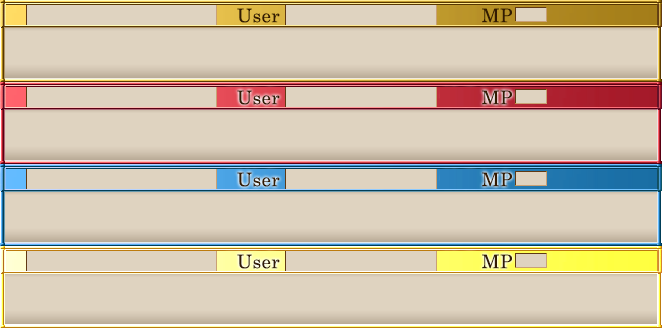
<style>
.page{position:relative;width:664px;height:328px;background:#dfd3c0}
.page>*{position:absolute;margin:0}
.t1{font:18.7px "CenturySchoolbook";letter-spacing:0.025em;color:#321a02}
</style>
<div class="page">
<p class="t1" style="left:237px;top:8px;width:43px;height:15px">User</p>
<p class="t1" style="left:482px;top:8px;width:30px;height:15px">MP</p>
<p class="t1" style="left:237px;top:90px;width:43px;height:15px">User</p>
<p class="t1" style="left:482px;top:90px;width:30px;height:15px">MP</p>
<p class="t1" style="left:237px;top:172px;width:43px;height:15px">User</p>
<p class="t1" style="left:482px;top:172px;width:30px;height:15px">MP</p>
<p class="t1" style="left:237px;top:254px;width:43px;height:15px">User</p>
<p class="t1" style="left:482px;top:254px;width:30px;height:15px">MP</p>
</div>
